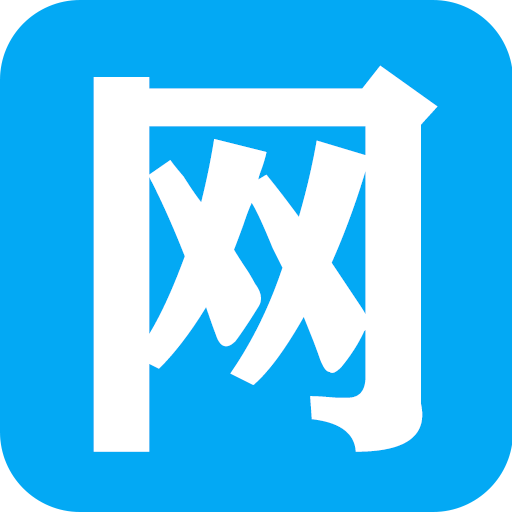
<style>
.page{position:relative;width:512px;height:512px;background:#03a9f4}
.page>*{position:absolute;margin:0}
.t1{font:416.7px "FZCHSJW--GB1-0";color:#ffffff}
</style>
<div class="page">
<p class="t1" style="left:93px;top:65px;width:345px;height:387px">网</p>
</div>
